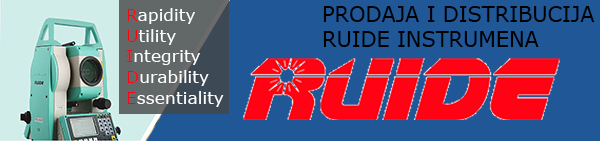
<style>
.page{position:relative;width:600px;height:141px;background:#205797}
.page>*{position:absolute;margin:0}
.t1{font:20.8px "Verdana";color:#000000}
.t2{font:17.3px "Verdana";color:#ffffff}
.t3{font:17.3px "Verdana";color:#ff0315}
.t4{font:17.3px "Verdana";color:#ff000c}
</style>
<div class="page">
<p class="t1" style="left:323px;top:6px;width:272px;height:41px">PRODAJA I DISTRIBUCIJA<br>RUIDE INSTRUMENA</p>
<p class="t2" style="left:127px;top:8px;width:97px;height:99px"><span class="t3">R</span>apidity<br><span class="t4">U</span>tility<br><span class="t3">I</span>ntegrity<br><span class="t3">D</span>urability<br><span class="t3">E</span>ssentiality</p>
</div>
